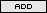
<style>
.page{position:relative;width:47px;height:13px;background:#e6e6e6}
.page>*{position:absolute;margin:0}
.t1{font:8px "Sevenet7";color:#000000}
</style>
<div class="page">
<p class="t1" style="left:15px;top:4px;width:17px;height:5px">ADD</p>
</div>
